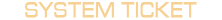
<style>
.page{position:relative;width:222px;height:20px;background:#ffffff}
.page>*{position:absolute;margin:0}
.t1{font:23px "MicrogrammaD-MediExte";letter-spacing:0.075em;color:#f7d093;font-weight:bold;scale:0.7 1}
</style>
<div class="page">
<p class="t1" style="left:25px;top:2px;width:172px;height:16px">SYSTEM TICKET</p>
</div>
